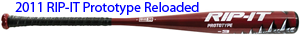
<style>
.page{position:relative;width:300px;height:36px;background:#ffffff}
.page>*{position:absolute;margin:0}
.t1{font:14px "MyriadPro-Regular";color:#0000ff}
</style>
<div class="page">
<p class="t1" style="left:15px;top:2px;width:184px;height:13px">2011 RIP-IT Prototype Reloaded</p>
</div>
